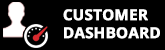
<style>
.page{position:relative;width:165px;height:50px;background:#000000}
.page>*{position:absolute;margin:0}
.t1{font:14.9px "OpenSans-Bold";color:#ffffff;text-transform:uppercase;font-weight:bold}
</style>
<div class="page">
<p class="t1" style="left:63px;top:9px;width:97px;height:30px">Customer <br>Dashboard</p>
</div>
